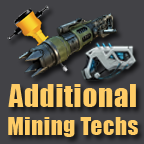
<style>
.page{position:relative;width:144px;height:144px;background:#424246}
.page>*{position:absolute;margin:0}
.t1{font:23px "Impact";letter-spacing:0.025em;color:#fecc66}
.t2{font:29px "Impact";letter-spacing:0.025em;color:#fecc66}
</style>
<div class="page">
<p class="t1" style="left:8px;top:84px;width:130px;height:53px;text-align:center"><span class="t2">Additional<br></span>Mining Techs</p>
</div>
